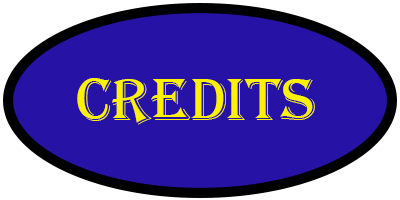
<style>
.page{position:relative;width:400px;height:200px;background:#2612a5}
.page>*{position:absolute;margin:0}
.t1{font:62.5px "Algerian";color:#fff200}
</style>
<div class="page">
<p class="t1" style="left:77px;top:78px;width:238px;height:47px">Credits</p>
</div>
